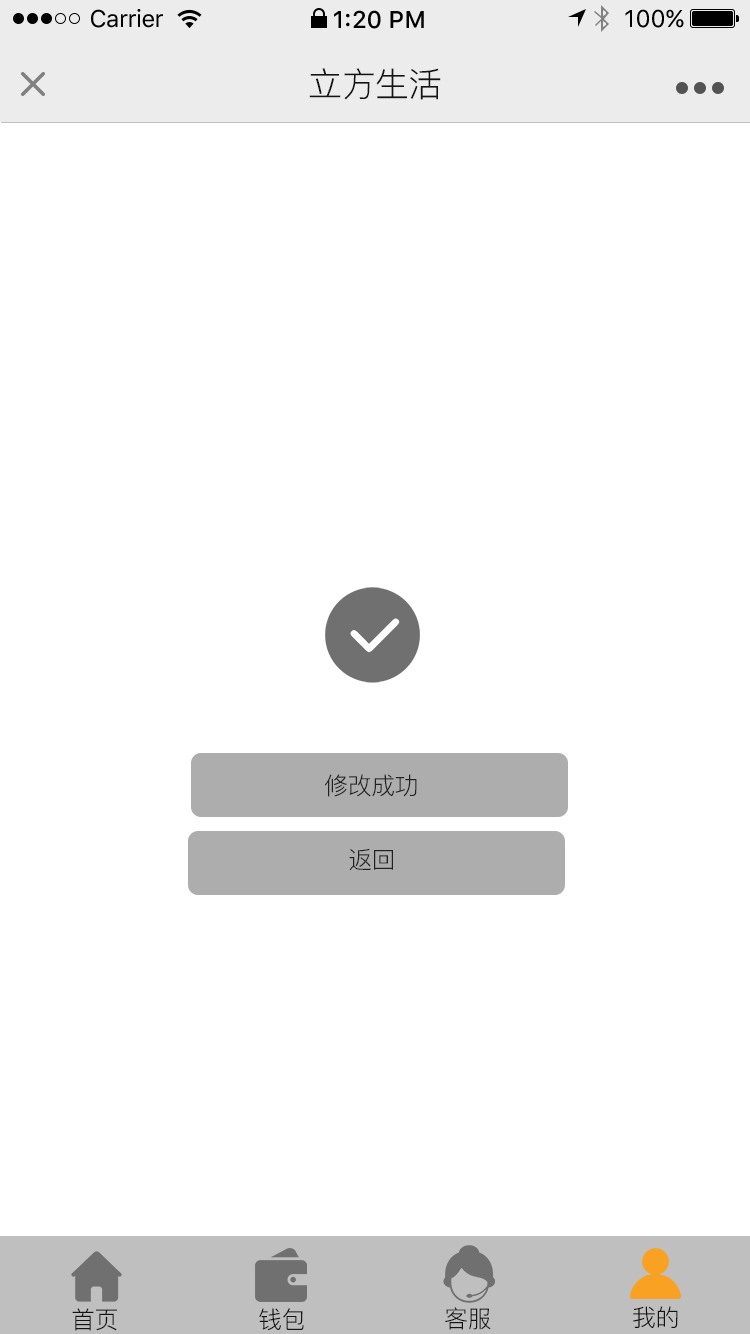
<style>
.page{position:relative;width:750px;height:1334px;background:#ffffff}
.page>*{position:absolute;margin:0}
.t1{font:24px "SFUIText-Regular";letter-spacing:-0.025em;color:#000000}
.t2{font:24px "SFUIText-Medium";color:#000000}
.t3{font:24px "SFUIText-Regular";color:#000000}
.t4{font:34px "PingFang-SC-Regular";letter-spacing:-0.02em;color:#141414}
.t5{font:24px "PingFang-SC-Regular";letter-spacing:-0.024em;color:#212121}
.t6{font:24px "PingFang-SC-Regular";letter-spacing:-0.02em;color:#141414}
</style>
<div class="page">
<p class="t1" style="left:91px;top:9px;width:72px;height:19px">Carrier</p>
<p class="t2" style="left:334px;top:10px;width:90px;height:19px">1:20 PM</p>
<p class="t3" style="left:625px;top:9px;width:59px;height:19px">100%</p>
<p class="t4" style="left:309px;top:68px;width:132px;height:32px">立方生活</p>
<p class="t5" style="left:325px;top:774px;width:92px;height:23px">修改成功</p>
<p class="t5" style="left:349px;top:848px;width:44px;height:23px">返回</p>
<p class="t6" style="left:72px;top:1308px;width:45px;height:23px">首页</p>
<p class="t6" style="left:259px;top:1308px;width:45px;height:23px">钱包</p>
<p class="t6" style="left:445px;top:1307px;width:46px;height:23px">客服</p>
<p class="t6" style="left:633px;top:1306px;width:45px;height:22px">我的</p>
</div>
